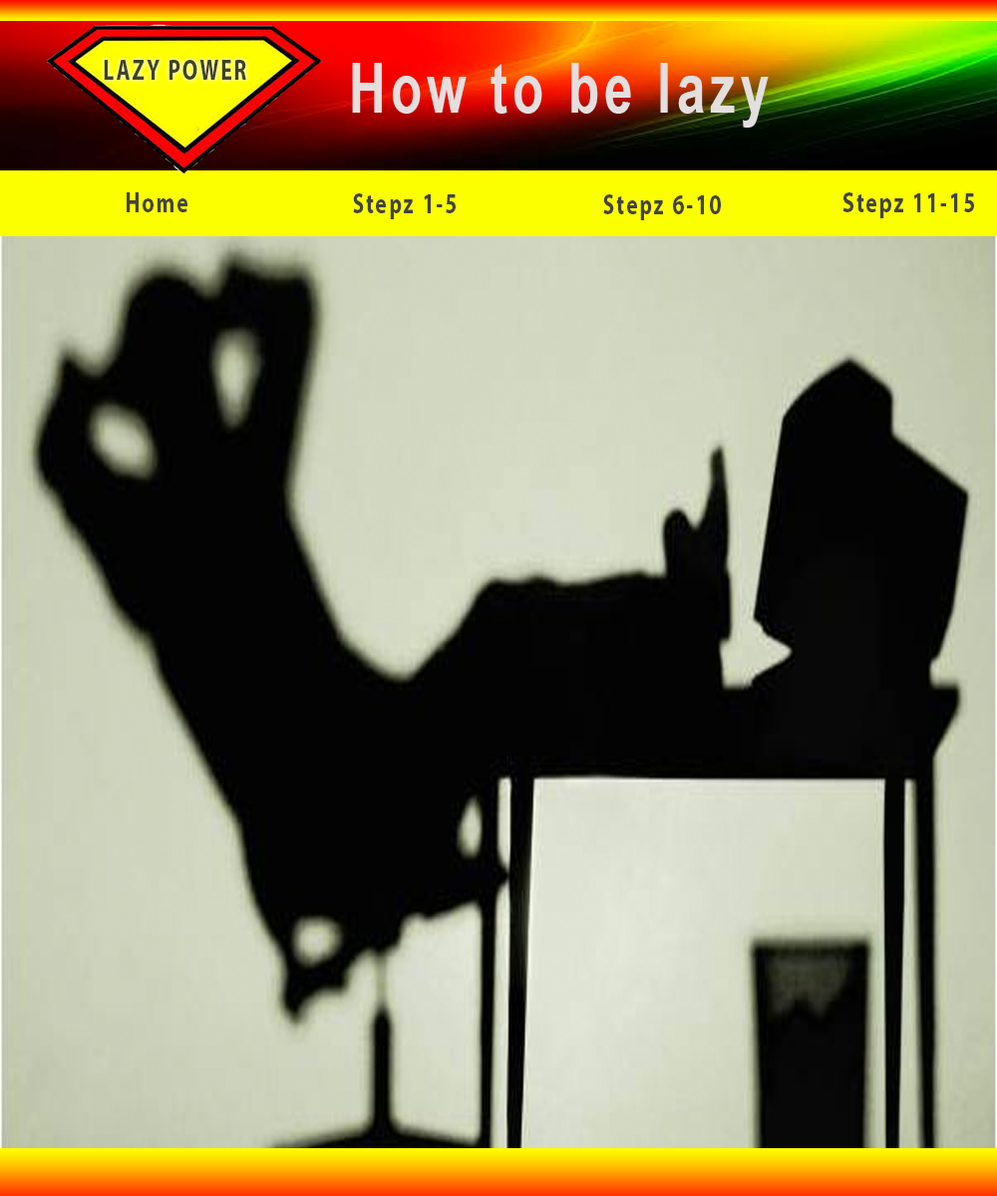
<style>
.page{position:relative;width:997px;height:1196px}
.page>*{position:absolute;margin:0}
.t1{font:28.7px "MyriadPro-Bold";letter-spacing:0.1em;color:#404321;scale:0.74 1}
.t2{font:68.9px "Arial-BoldMT";letter-spacing:0.1em;color:#e4dfdf;scale:0.74 1}
.t3{font:28.7px "MyriadPro-Bold";letter-spacing:0.1em;color:#434343;scale:0.74 1}
</style>
<div class="page">
<p class="t1" style="left:104px;top:60px;width:142px;height:20px">LAZY POWER</p>
<p class="t2" style="left:352px;top:63px;width:417px;height:65px">How to be lazy</p>
<p class="t3" style="left:127px;top:192px;width:60px;height:20px">Home</p>
<p class="t3" style="left:353px;top:193px;width:103px;height:26px">Stepz 1-5</p>
<p class="t3" style="left:603px;top:194px;width:118px;height:26px">Stepz 6-10</p>
<p class="t3" style="left:842px;top:192px;width:132px;height:26px">Stepz 11-15</p>
</div>
